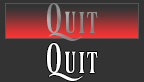
<style>
.page{position:relative;width:144px;height:82px;background:#333333}
.page>*{position:absolute;margin:0}
.t1{font:36px "Ferrum";color:#919191}
.t2{font:36px "Ferrum";color:#ffffff}
</style>
<div class="page">
<p class="t1" style="left:47px;top:3px;width:51px;height:38px">Quit</p>
<p class="t2" style="left:47px;top:43px;width:51px;height:38px">Quit</p>
</div>
